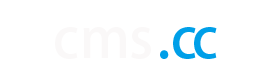
<style>
.page{position:relative;width:271px;height:74px;background:#ffffff}
.page>*{position:absolute;margin:0}
.t1{font:55px "AdobeHeitiStd-Regular";color:#faf8f8}
.t2{font:55px "AdobeHeitiStd-Regular";letter-spacing:-0.1em;color:#009fe8}
</style>
<div class="page">
<p class="t1" style="left:55px;top:27px;width:96px;height:32px">cms</p>
<p class="t2" style="left:160px;top:27px;width:57px;height:32px">. cc</p>
</div>
